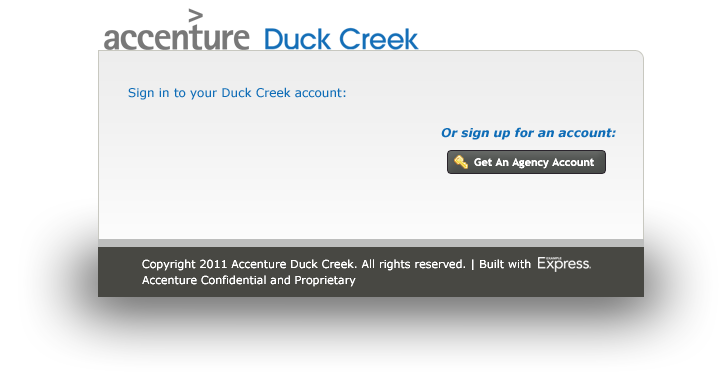
<style>
.page{position:relative;width:728px;height:382px;background:#ffffff}
.page>*{position:absolute;margin:0}
.t1{font:12px "Verdana";color:#0f6db7}
.t2{font:12px "Verdana-BoldItalic";color:#0f6db7}
.t3{font:11px "TrebuchetMS-Bold";color:#ffffff}
.t4{font:11px "Verdana";color:#ffffff}
</style>
<div class="page">
<p class="t1" style="left:128px;top:87px;width:218px;height:13px">Sign in to your Duck Creek account:</p>
<p class="t2" style="left:441px;top:127px;width:175px;height:13px">Or sign up for an account:</p>
<p class="t3" style="left:474px;top:158px;width:120px;height:11px">Get An Agency Account</p>
<p class="t4" style="left:142px;top:259px;width:389px;height:12px">Copyright 2011 Accenture Duck Creek. All rights reserved. | Built with</p>
<p class="t4" style="left:142px;top:275px;width:214px;height:12px">Accenture Confidential and Proprietary</p>
</div>
